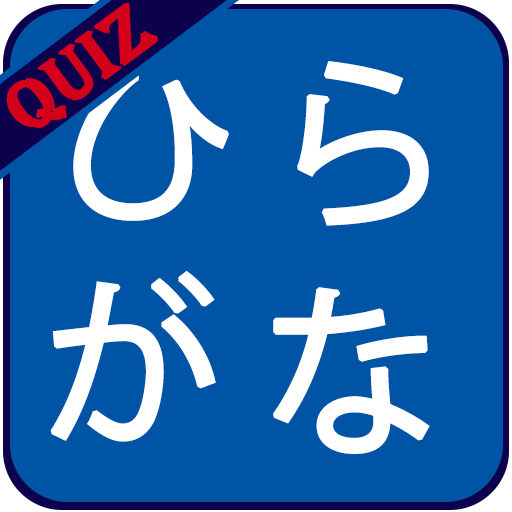
<style>
.page{position:relative;width:512px;height:512px;background:#0054a6}
.page>*{position:absolute;margin:0}
.t1{font:72px "Algerian";color:#d4001a;text-transform:uppercase;font-weight:bold}
.t2{font:180px "KozGoPr6N-Regular";color:#ffffff;text-transform:uppercase;font-weight:bold}
</style>
<div class="page">
<p class="t1" style="left:6px;top:2px;width:152px;height:127px;rotate:-37deg">QUIZ</p>
<p class="t2" style="left:297px;top:61px;width:132px;height:165px">ら</p>
<p class="t2" style="left:61px;top:66px;width:168px;height:155px">ひ</p>
<p class="t2" style="left:50px;top:271px;width:166px;height:171px">が</p>
<p class="t2" style="left:273px;top:287px;width:157px;height:167px">な</p>
</div>
